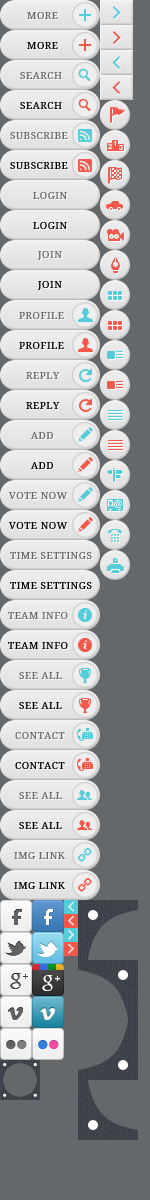
<style>
.page{position:relative;width:150px;height:1200px;background:#65686b}
.page>*{position:absolute;margin:0}
.t1{font:10px "DroidSerif";letter-spacing:0.05em;color:#65686b}
.t2{font:10px "DroidSerif";letter-spacing:0.05em;color:#000000}
</style>
<div class="page">
<p class="t1" style="left:27px;top:12px;width:31px;height:7px">MORE</p>
<p class="t2" style="left:27px;top:42px;width:31px;height:7px">MORE</p>
<p class="t1" style="left:20px;top:72px;width:42px;height:7px">SEARCH</p>
<p class="t2" style="left:20px;top:102px;width:42px;height:7px">SEARCH</p>
<p class="t1" style="left:10px;top:132px;width:58px;height:7px">SUBSCRIBE</p>
<p class="t2" style="left:10px;top:162px;width:58px;height:7px">SUBSCRIBE</p>
<p class="t1" style="left:33px;top:192px;width:34px;height:7px">LOGIN</p>
<p class="t2" style="left:33px;top:222px;width:34px;height:7px">LOGIN</p>
<p class="t1" style="left:37px;top:251px;width:25px;height:9px">JOIN</p>
<p class="t2" style="left:37px;top:281px;width:25px;height:9px">JOIN</p>
<p class="t1" style="left:19px;top:312px;width:45px;height:7px">PROFILE</p>
<p class="t2" style="left:19px;top:342px;width:45px;height:7px">PROFILE</p>
<p class="t1" style="left:26px;top:372px;width:34px;height:7px">REPLY</p>
<p class="t2" style="left:26px;top:402px;width:34px;height:7px">REPLY</p>
<p class="t1" style="left:30px;top:432px;width:23px;height:7px">ADD</p>
<p class="t2" style="left:30px;top:462px;width:23px;height:7px">ADD</p>
<p class="t1" style="left:8px;top:492px;width:60px;height:7px">VOTE NOW</p>
<p class="t2" style="left:8px;top:522px;width:60px;height:7px">VOTE NOW</p>
<p class="t1" style="left:10px;top:552px;width:82px;height:7px">TIME SETTINGS</p>
<p class="t2" style="left:10px;top:582px;width:82px;height:7px">TIME SETTINGS</p>
<p class="t1" style="left:8px;top:612px;width:60px;height:7px">TEAM INFO</p>
<p class="t2" style="left:8px;top:642px;width:60px;height:7px">TEAM INFO</p>
<p class="t1" style="left:19px;top:672px;width:43px;height:7px">SEE ALL</p>
<p class="t2" style="left:19px;top:702px;width:43px;height:7px">SEE ALL</p>
<p class="t1" style="left:15px;top:732px;width:50px;height:7px">CONTACT</p>
<p class="t2" style="left:15px;top:762px;width:50px;height:7px">CONTACT</p>
<p class="t1" style="left:19px;top:792px;width:43px;height:7px">SEE ALL</p>
<p class="t2" style="left:19px;top:822px;width:43px;height:7px">SEE ALL</p>
<p class="t1" style="left:14px;top:852px;width:51px;height:7px">IMG LINK</p>
<p class="t2" style="left:14px;top:882px;width:51px;height:7px">IMG LINK</p>
</div>
